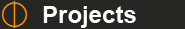
<style>
.page{position:relative;width:185px;height:29px;background:#272622}
.page>*{position:absolute;margin:0}
.t1{font:24px "Arial-BoldMT";color:#ffffff}
</style>
<div class="page">
<p class="t1" style="left:43px;top:6px;width:93px;height:22px">Projects</p>
</div>
